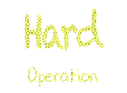
<style>
.page{position:relative;width:127px;height:93px;background:#ffffff}
.page>*{position:absolute;margin:0}
.t1{font:20px/56px "DJBChalkItUp";scale:0.9 1}
.t2{font:46px/56px "Chalkduster";letter-spacing:-0.08em;scale:0.75 1}
</style>
<div class="page">
<p class="t1" style="left:24px;top:8px;width:80px;height:79px;text-align:center"><span class="t2">Hard<br></span>Operation</p>
</div>
